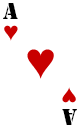
<style>
.page{position:relative;width:80px;height:128px;background:#ffffff}
.page>*{position:absolute;margin:0}
.t1{font:24px "Stencil";color:#000000}
</style>
<div class="page">
<p class="t1" style="left:3px;top:3px;width:15px;height:16px">A</p>
<p class="t1" style="left:62px;top:109px;width:15px;height:16px;rotate:180deg">A</p>
</div>
